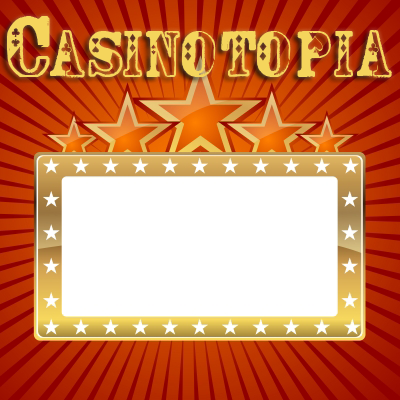
<style>
.page{position:relative;width:400px;height:400px;background:#ffffff}
.page>*{position:absolute;margin:0}
.t1{font:77px "CasinoQueenNormal";letter-spacing:0.01em;color:#f5d55c}
</style>
<div class="page">
<p class="t1" style="left:7px;top:16px;width:385px;height:62px">Casinotopia</p>
</div>
